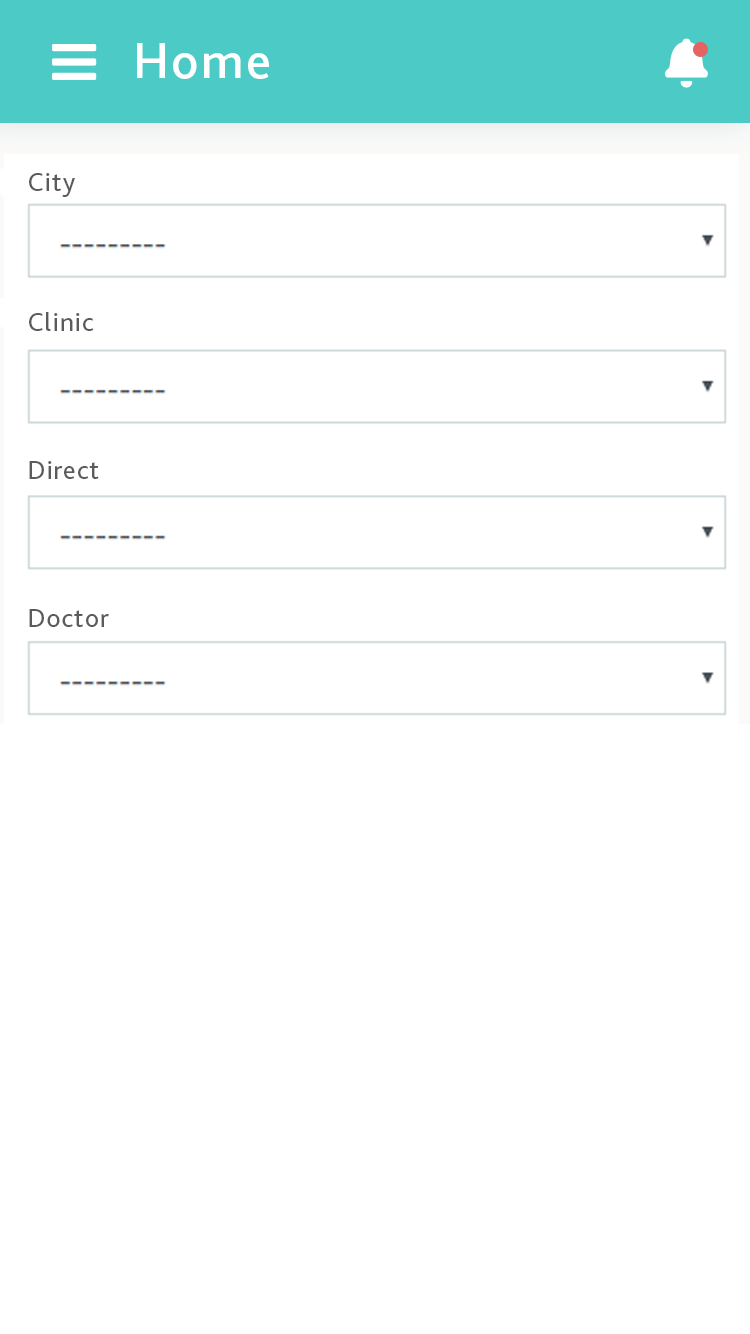
<style>
.page{position:relative;width:750px;height:1334px;background:#ffffff}
.page>*{position:absolute;margin:0}
.t1{font:51.7px "BlissPro-Medium";letter-spacing:0.04em;color:#ffffff}
.t2{font:26.8px "BlissPro";letter-spacing:0.04em;color:#5b5b5b}
</style>
<div class="page">
<p class="t1" style="left:137px;top:43px;width:132px;height:36px">Home</p>
<p class="t2" style="left:29px;top:173px;width:46px;height:24px">City</p>
<p class="t2" style="left:29px;top:312px;width:65px;height:19px">Clinic</p>
<p class="t2" style="left:29px;top:461px;width:70px;height:18px">Direct</p>
<p class="t2" style="left:29px;top:609px;width:80px;height:18px">Doctor</p>
</div>
